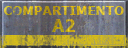
<style>
.page{position:relative;width:128px;height:48px}
.page>*{position:absolute;margin:0}
.t1{font:13.3px/14px "Verdana-Bold";scale:0.9 1}
.t2{font:17.8px/17px "Verdana-Bold";scale:0.9 1}
</style>
<div class="page">
<p class="t1" style="left:4px;top:6px;width:120px;height:26px;text-align:center">COMPARTIMENTO<br><span class="t2">A2</span></p>
</div>
